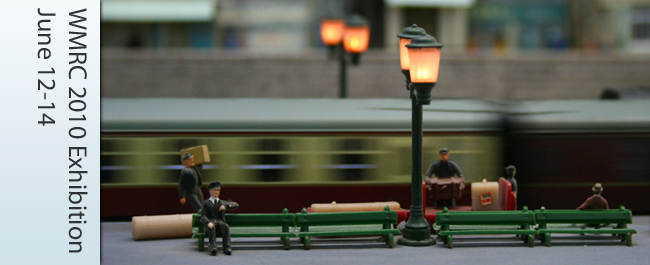
<style>
.page{position:relative;width:650px;height:265px}
.page>*{position:absolute;margin:0}
.t1{font:26px "MyriadPro-Regular";color:#313131}
</style>
<div class="page">
<p class="t1" style="left:37px;top:8px;width:51px;height:245px;rotate:90deg">WMRC 2010 Exhibition<br>June 12-14</p>
</div>
